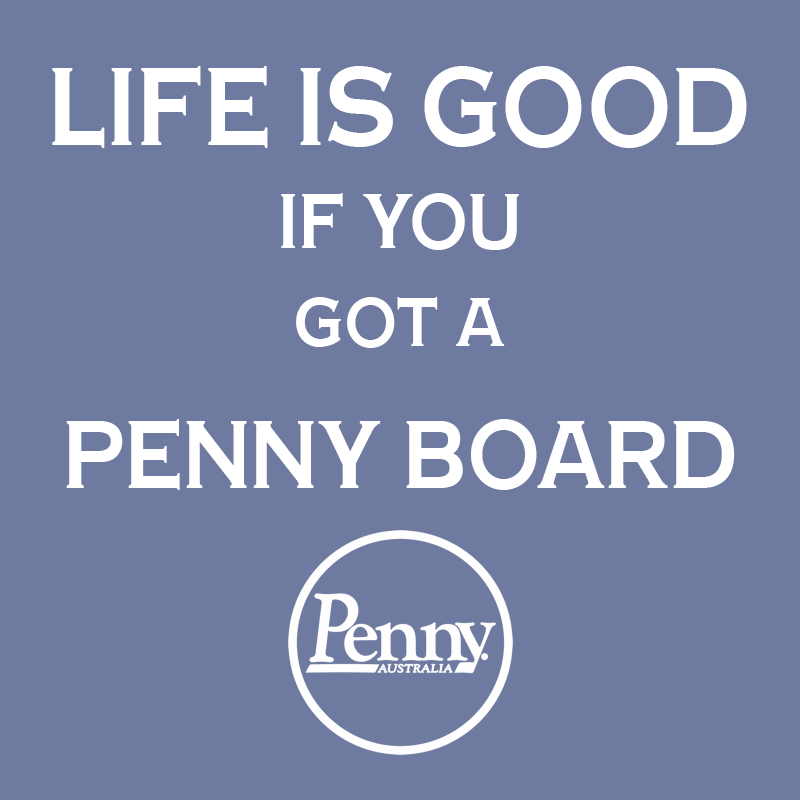
<style>
.page{position:relative;width:800px;height:800px;background:#6e7a9f}
.page>*{position:absolute;margin:0}
.t1{font:106.4px "CopperPennyDTPNormal";color:#ffffff;scale:0.81 1}
.t2{font:74px "CopperPennyDTPNormal";color:#ffffff;scale:0.81 1}
.t3{font:66px "CopperPennyDTPNormal";color:#ffffff;scale:0.82 1}
.t4{font:91.9px "CopperPennyDTPNormal";color:#ffffff;scale:0.81 1}
</style>
<div class="page">
<p class="t1" style="left:52px;top:66px;width:695px;height:82px">LIFE IS GOOD</p>
<p class="t2" style="left:281px;top:193px;width:238px;height:57px">IF YOU</p>
<p class="t3" style="left:296px;top:297px;width:209px;height:51px">GOT A</p>
<p class="t4" style="left:66px;top:419px;width:669px;height:71px">PENNY BOARD</p>
</div>
